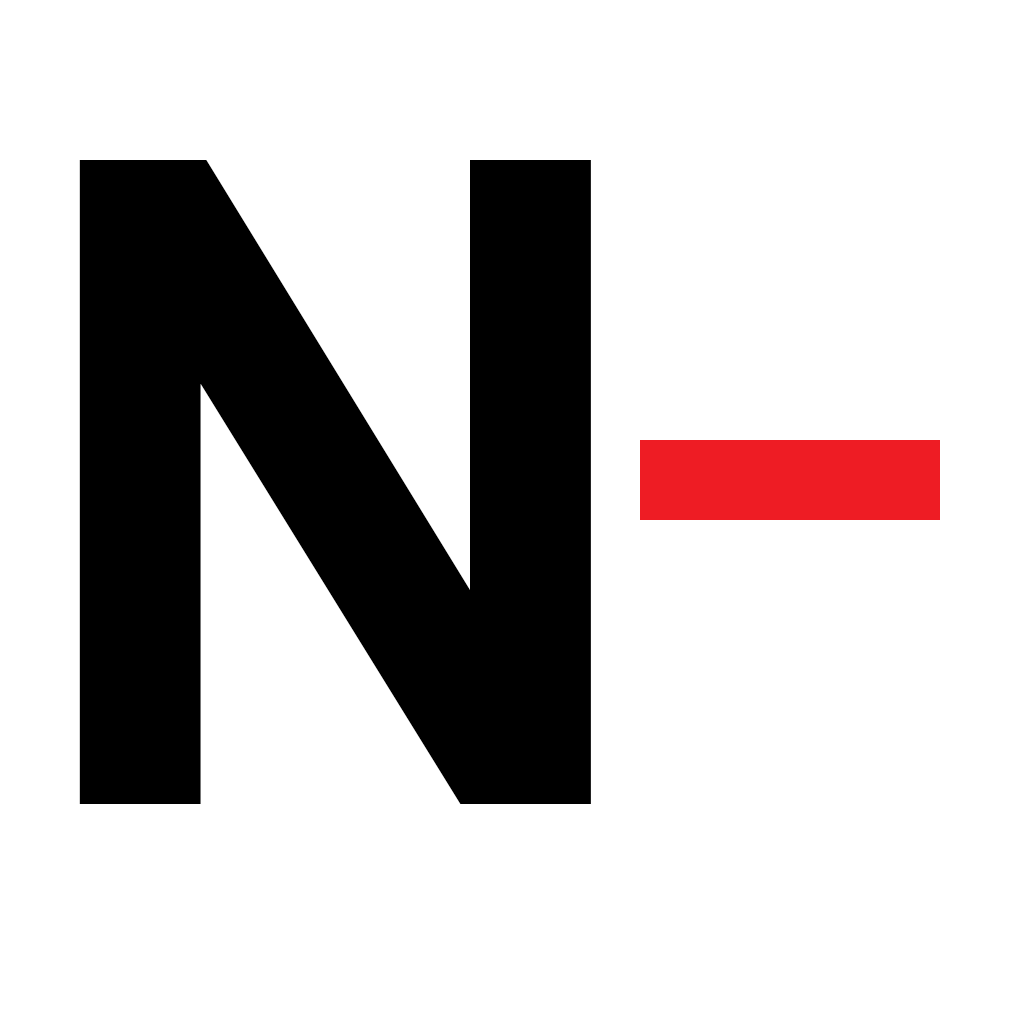
<style>
.page{position:relative;width:1024px;height:1024px;background:#ffffff}
.page>*{position:absolute;margin:0}
.t1{font:900px "Arial-BoldMT";color:#000000}
</style>
<div class="page">
<p class="t1" style="left:79px;top:160px;width:512px;height:644px">N</p>
</div>
